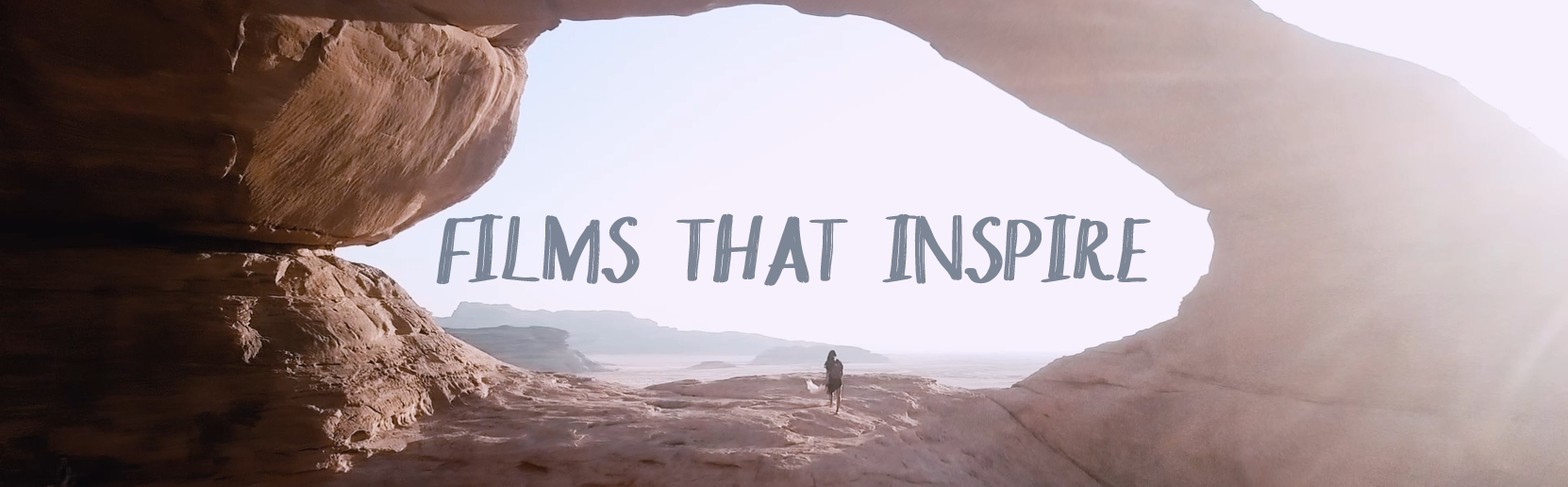
<style>
.page{position:relative;width:1568px;height:487px}
.page>*{position:absolute;margin:0}
.t1{font:99.4px "Chokle";color:#7d8695}
</style>
<div class="page">
<p class="t1" style="left:436px;top:213px;width:715px;height:73px">FILMS THAT INSPIRE</p>
</div>
